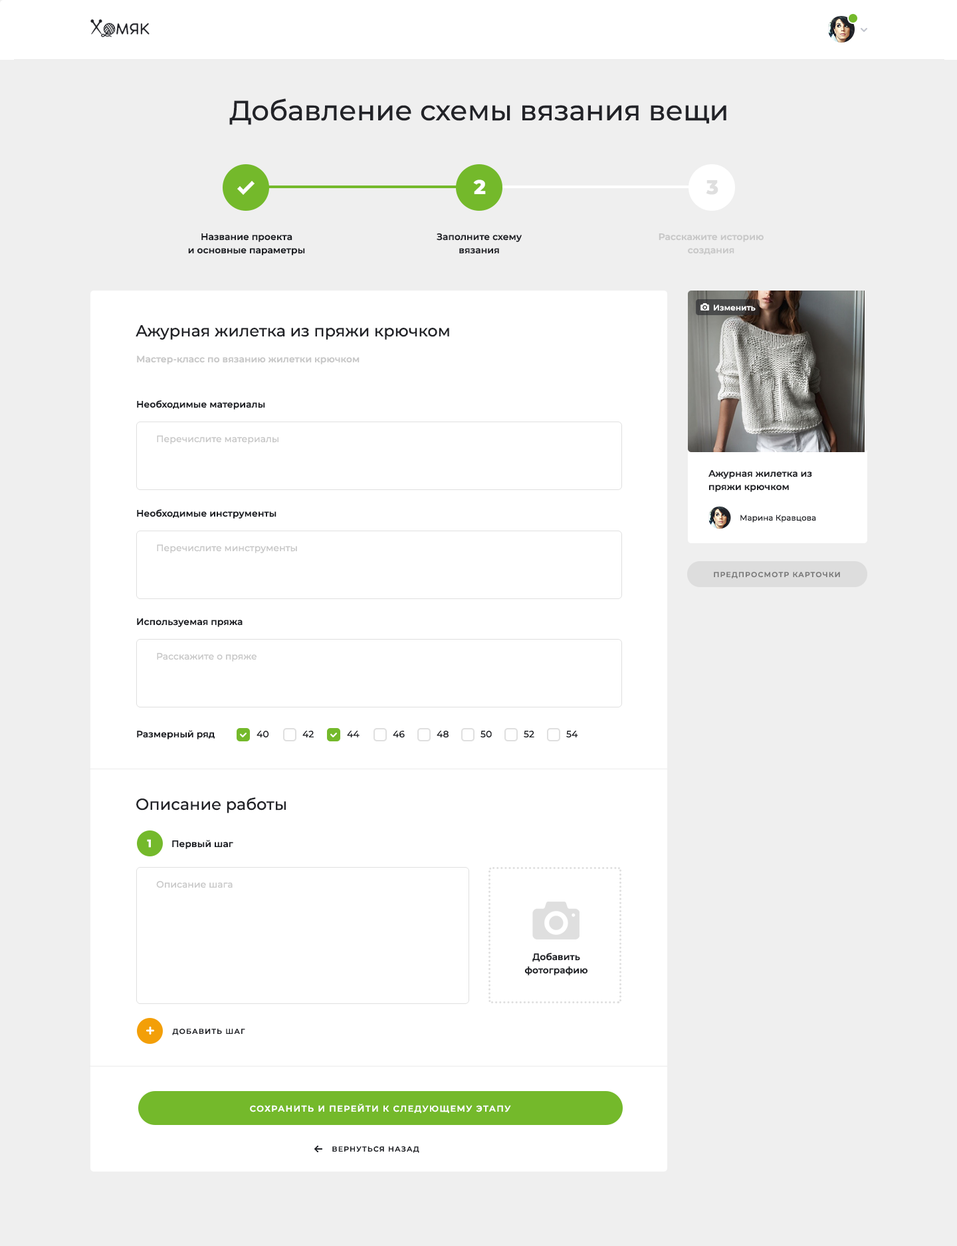
<style>
.page{position:relative;width:957px;height:1246px;background:#efefef}
.page>*{position:absolute;margin:0}
.t1{font:27.9px "Montserrat-Medium";color:#222328}
.t2{font:19.9px "Montserrat-ExtraBold";color:#ffffff}
.t3{font:19.9px "Montserrat-ExtraBold";color:#dfdfdf}
.t4{font:9.3px/13.3px "Montserrat-SemiBold";color:#1c1e23}
.t5{font:9.3px/13.3px "Montserrat-SemiBold";color:#222328}
.t6{font:9.3px/13.3px "Montserrat-SemiBold";color:#c8c8c8}
.t7{font:8px "Montserrat-SemiBold";color:#ffffff}
.t8{font:16px "Montserrat-Medium";color:#222328}
.t9{font:9.3px "Montserrat-SemiBold";color:#c8c8c8}
.t10{font:9.3px "Montserrat-SemiBold";color:#1c1e23}
.t11{font:9.3px "Montserrat-Medium";color:#c8c8c8}
.t12{font:8px "Montserrat-Medium";color:#222328}
.t13{font:7.3px "Montserrat-SemiBold";letter-spacing:0.1em;color:#787878;text-transform:uppercase}
.t14{font:9.3px "Montserrat-Medium";color:#1c1e23}
.t15{font:10.6px "Montserrat-ExtraBold";color:#ffffff}
.t16{font:7.3px "Montserrat-SemiBold";letter-spacing:0.1em;color:#1c1e23;text-transform:uppercase}
.t17{font:8.6px "Montserrat-SemiBold";letter-spacing:0.1em;color:#ffffff;text-transform:uppercase}
</style>
<div class="page">
<p class="t1" style="left:229px;top:98px;width:498px;height:27px">Добавление схемы вязания вещи</p>
<p class="t2" style="left:473px;top:179px;width:13px;height:15px">2</p>
<p class="t3" style="left:706px;top:180px;width:13px;height:15px">3</p>
<p class="t4" style="left:188px;top:233px;width:117px;height:22px;text-align:center">Название проекта<br>и основные параметры</p>
<p class="t5" style="left:437px;top:233px;width:85px;height:21px;text-align:center">Заполните схему<br>вязания</p>
<p class="t6" style="left:659px;top:233px;width:105px;height:22px;text-align:center">Расскажите историю<br>создания</p>
<p class="t7" style="left:714px;top:304px;width:42px;height:7px">Изменить</p>
<p class="t8" style="left:136px;top:325px;width:313px;height:15px">Ажурная жилетка из пряжи крючком</p>
<p class="t9" style="left:137px;top:356px;width:223px;height:8px">Мастер-класс по вязанию жилетки крючком</p>
<p class="t10" style="left:137px;top:400px;width:128px;height:9px">Необходимые материалы</p>
<p class="t11" style="left:157px;top:435px;width:122px;height:9px">Перечислите материалы</p>
<p class="t5" style="left:709px;top:470px;width:103px;height:22px">Ажурная жилетка из <br>пряжи крючком</p>
<p class="t10" style="left:137px;top:509px;width:140px;height:9px">Необходимые инструменты</p>
<p class="t12" style="left:741px;top:515px;width:75px;height:7px">Марина Кравцова</p>
<p class="t11" style="left:157px;top:544px;width:140px;height:9px">Перечислите минструменты</p>
<p class="t13" style="left:714px;top:572px;width:126px;height:6px">предпросмотр карточки</p>
<p class="t10" style="left:137px;top:618px;width:106px;height:9px">Используемая пряжа</p>
<p class="t11" style="left:157px;top:653px;width:100px;height:8px">Расскажите о пряже</p>
<p class="t10" style="left:137px;top:730px;width:78px;height:9px">Размерный ряд</p>
<p class="t14" style="left:257px;top:731px;width:12px;height:7px">40</p>
<p class="t14" style="left:302px;top:731px;width:12px;height:6px">42</p>
<p class="t14" style="left:347px;top:731px;width:13px;height:6px">44</p>
<p class="t14" style="left:393px;top:731px;width:12px;height:7px">46</p>
<p class="t14" style="left:437px;top:731px;width:12px;height:7px">48</p>
<p class="t14" style="left:481px;top:731px;width:11px;height:7px">50</p>
<p class="t14" style="left:524px;top:731px;width:10px;height:7px">52</p>
<p class="t14" style="left:566px;top:731px;width:12px;height:7px">54</p>
<p class="t8" style="left:136px;top:797px;width:150px;height:16px">Описание работы</p>
<p class="t15" style="left:147px;top:839px;width:4px;height:9px">1</p>
<p class="t10" style="left:172px;top:840px;width:61px;height:9px">Первый шаг</p>
<p class="t11" style="left:156px;top:881px;width:77px;height:7px">Описание шага</p>
<p class="t4" style="left:524px;top:953px;width:64px;height:22px;text-align:center">Добавить<br>фотографию</p>
<p class="t16" style="left:172px;top:1028px;width:73px;height:7px">добавить шаг</p>
<p class="t17" style="left:250px;top:1103px;width:261px;height:10px">Сохранить и перейти к следующему этапу</p>
<p class="t16" style="left:332px;top:1146px;width:87px;height:7px">вернуться назад</p>
</div>
